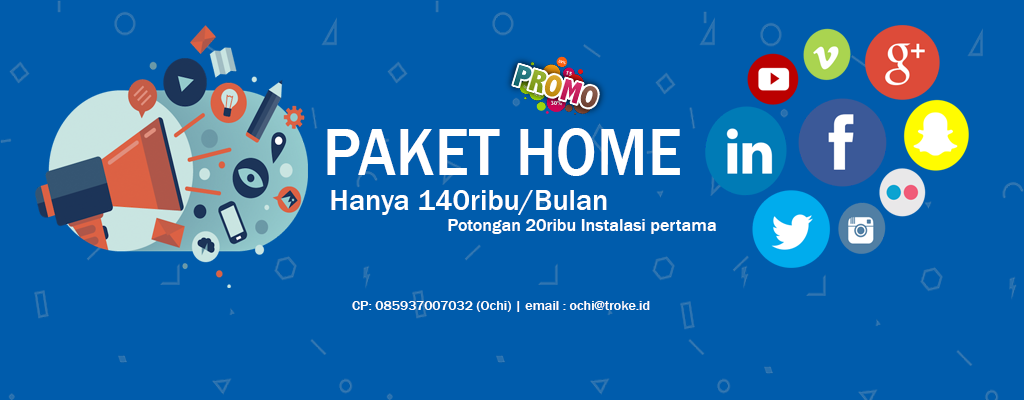
<style>
.page{position:relative;width:1024px;height:400px;background:#005cac}
.page>*{position:absolute;margin:0}
.t1{font:69.3px "FranklinGothic-Medium";color:#ffffff;scale:0.91 1}
.t2{font:30px "FranklinGothic-Medium";color:#ffffff}
.t3{font:18px "FranklinGothic-Medium";color:#ffffff}
.t4{font:14px "FranklinGothic-Medium";color:#ffffff}
</style>
<div class="page">
<p class="t1" style="left:327px;top:128px;width:353px;height:48px">PAKET HOME</p>
<p class="t2" style="left:331px;top:190px;width:276px;height:25px">Hanya 140ribu/Bulan</p>
<p class="t3" style="left:448px;top:219px;width:268px;height:15px">Potongan 20ribu Instalasi pertama</p>
<p class="t4" style="left:352px;top:301px;width:298px;height:11px">CP: 085937007032 (Ochi) | email : ochi@troke.id</p>
</div>
